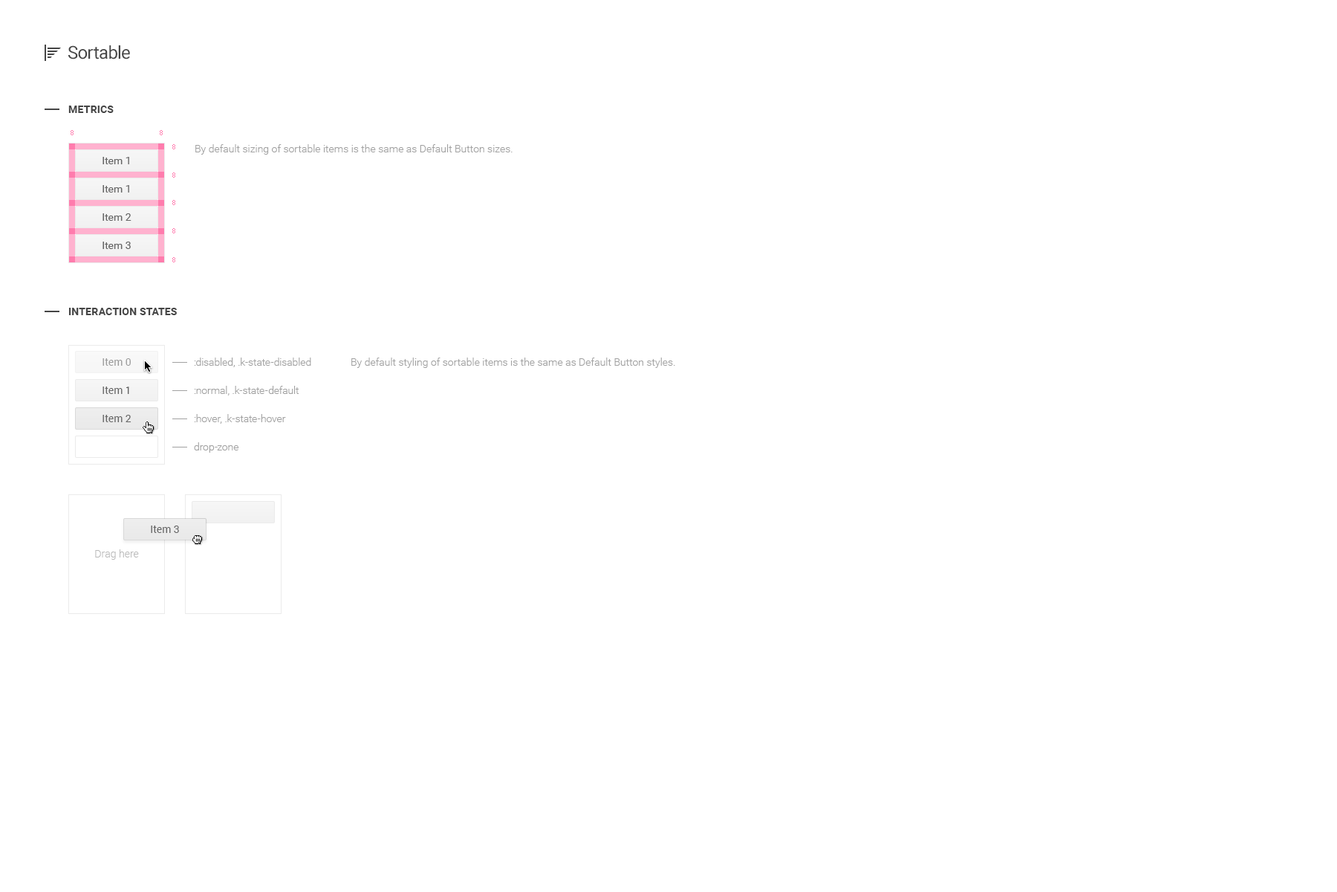
<style>
.page{position:relative;width:1337px;height:892px;background:#ffffff}
.page>*{position:absolute;margin:0}
.t1{font:17.8px "Roboto-Regular";letter-spacing:-0.025em;color:#454545}
.t2{font:10.4px "Roboto-Bold";letter-spacing:0.01em;color:#454545;text-transform:uppercase}
.t3{font:6.7px "Tahoma";color:#ff7cae}
.t4{font:10.4px "Roboto-Light";color:#a1a1a1}
.t5{font:10.4px "Roboto-Regular";color:#656565}
.t6{font:10.4px "Roboto-Regular";color:#9b9b9b}
.t7{font:10.4px/28.2px "Roboto-Light";color:#a1a1a1}
.t8{font:10.4px "Roboto-Light";color:#bababa}
</style>
<div class="page">
<p class="t1" style="left:68px;top:45px;width:62px;height:14px">Sortable</p>
<p class="t2" style="left:68px;top:106px;width:46px;height:7px">Metrics</p>
<p class="t3" style="left:71px;top:130px;width:3px;height:5px">8</p>
<p class="t3" style="left:160px;top:130px;width:3px;height:5px">8</p>
<p class="t3" style="left:172px;top:144px;width:3px;height:5px">8</p>
<p class="t4" style="left:195px;top:144px;width:318px;height:11px">By default sizing of sortable items is the same as Default Button sizes.</p>
<p class="t5" style="left:103px;top:157px;width:26px;height:7px">Item 1</p>
<p class="t3" style="left:172px;top:172px;width:3px;height:6px">8</p>
<p class="t5" style="left:103px;top:185px;width:26px;height:7px">Item 1</p>
<p class="t3" style="left:172px;top:200px;width:3px;height:5px">8</p>
<p class="t5" style="left:103px;top:213px;width:29px;height:8px">Item 2</p>
<p class="t3" style="left:172px;top:228px;width:3px;height:5px">8</p>
<p class="t5" style="left:103px;top:241px;width:28px;height:8px">Item 3</p>
<p class="t3" style="left:172px;top:257px;width:3px;height:5px">8</p>
<p class="t2" style="left:68px;top:308px;width:109px;height:7px">Interaction states</p>
<p class="t6" style="left:103px;top:358px;width:28px;height:8px">Item 0</p>
<p class="t7" style="left:194px;top:357px;width:117px;height:95px">:disabled, .k-state-disabled<br>:normal, .k-state-default<br>:hover, .k-state-hover<br>drop-zone</p>
<p class="t4" style="left:351px;top:357px;width:324px;height:11px">By default styling of sortable items is the same as Default Button styles.</p>
<p class="t5" style="left:103px;top:386px;width:26px;height:8px">Item 1</p>
<p class="t5" style="left:103px;top:415px;width:29px;height:7px">Item 2</p>
<p class="t5" style="left:151px;top:525px;width:28px;height:8px">Item 3</p>
<p class="t8" style="left:95px;top:549px;width:44px;height:10px">Drag here</p>
</div>
